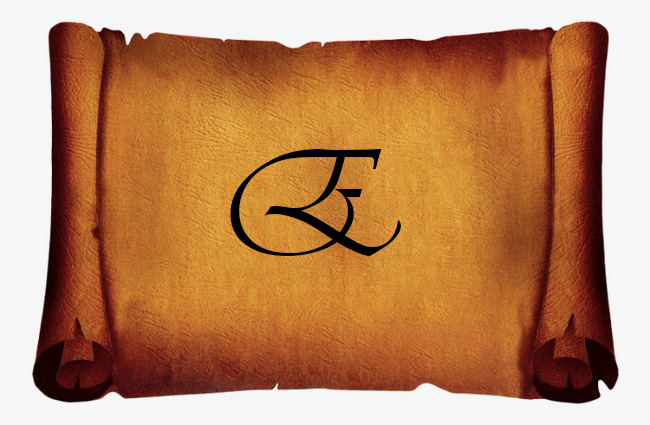
<style>
.page{position:relative;width:650px;height:425px;background:#f6f6f6}
.page>*{position:absolute;margin:0}
.t1{font:160px "Vivaldii";color:#000000}
</style>
<div class="page">
<p class="t1" style="left:230px;top:149px;width:171px;height:107px">E</p>
</div>
